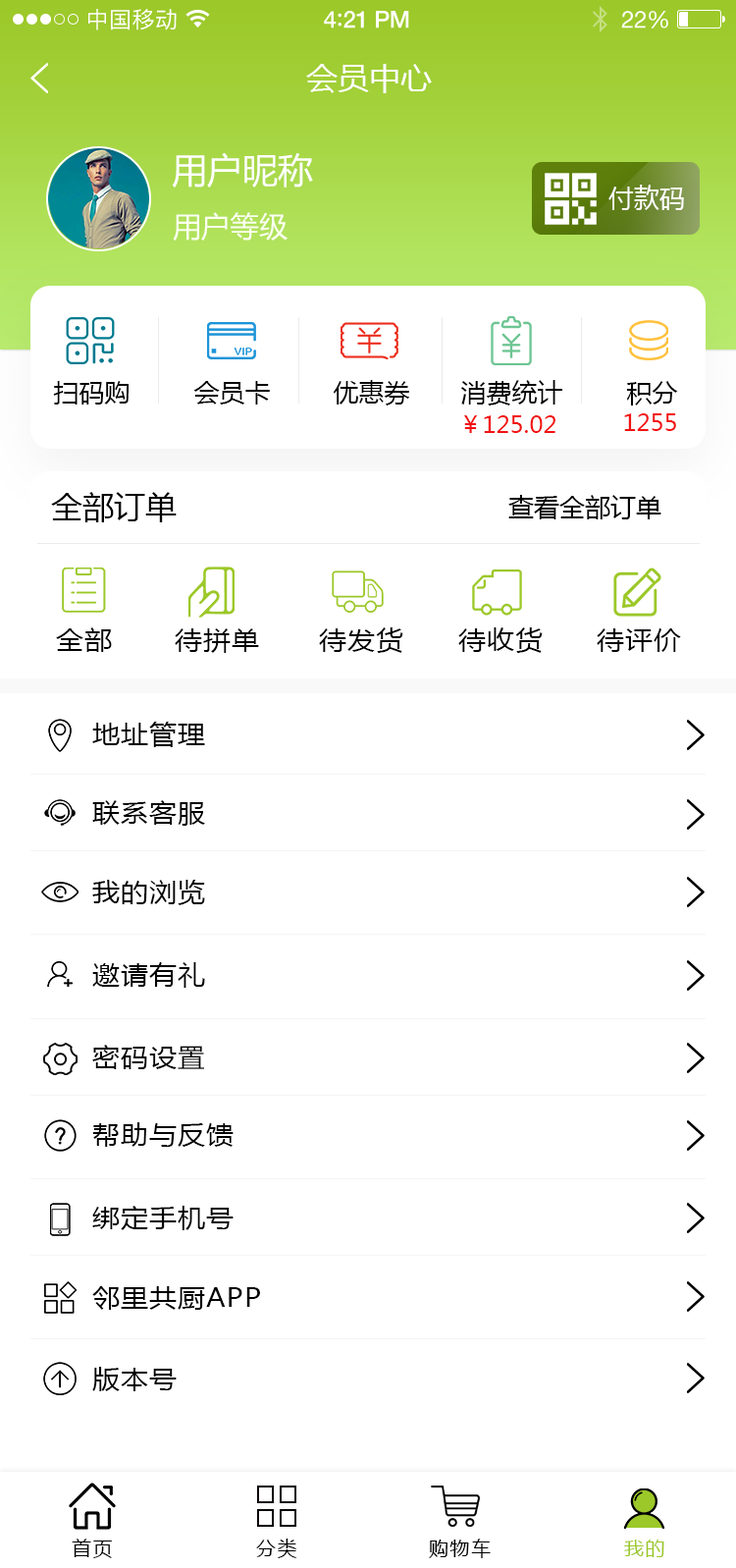
<style>
.page{position:relative;width:736px;height:1568px;background:#ffffff}
.page>*{position:absolute;margin:0}
.t1{font:22.6px "PingFangSC-Regular";letter-spacing:0.02em;color:#ffffff}
.t2{font:23.6px "HelveticaNeue-Medium";letter-spacing:-0.02em;color:#ffffff}
.t3{font:25.5px "Avenir-Medium";letter-spacing:-0.02em;color:#ffffff}
.t4{font:23.6px "HelveticaNeue";letter-spacing:-0.02em;color:#ffffff}
.t5{font:31.4px "MicrosoftYaHei";color:#ffffff;text-transform:uppercase}
.t6{font:35.4px "MicrosoftYaHei";color:#ffffff;text-transform:uppercase}
.t7{font:25.5px "MicrosoftYaHei";color:#ffffff;text-transform:uppercase}
.t8{font:28.8px "MicrosoftYaHei";color:#fbffef;text-transform:uppercase}
.t9{font:25.5px "MicrosoftYaHei";color:#000000;text-transform:uppercase}
.t10{font:23.6px "MicrosoftYaHei";color:#f21212;text-transform:uppercase}
.t11{font:31.4px "MicrosoftYaHei";color:#000000;text-transform:uppercase}
.t12{font:25.5px "MicrosoftYaHei";letter-spacing:0.05em;color:#000000;scale:1.06 1}
.t13{font:19.6px "MicrosoftYaHei";letter-spacing:0.08em;color:#000000;text-transform:uppercase}
.t14{font:19.6px "MicrosoftYaHei";letter-spacing:0.08em;color:#9cc829;text-transform:uppercase}
</style>
<div class="page">
<p class="t1" style="left:88px;top:9px;width:89px;height:21px">中国移动</p>
<p class="t2" style="left:324px;top:11px;width:85px;height:17px">4<span class="t3">:</span>21 PM</p>
<p class="t4" style="left:622px;top:11px;width:47px;height:17px">22%</p>
<p class="t5" style="left:306px;top:64px;width:126px;height:29px">会员中心</p>
<p class="t6" style="left:172px;top:152px;width:141px;height:36px">用户昵称</p>
<p class="t7" style="left:609px;top:185px;width:75px;height:25px">付款码</p>
<p class="t8" style="left:173px;top:212px;width:115px;height:29px">用户等级</p>
<p class="t9" style="left:53px;top:381px;width:76px;height:24px">扫码购</p>
<p class="t9" style="left:193px;top:381px;width:77px;height:24px">会员卡</p>
<p class="t9" style="left:334px;top:380px;width:76px;height:26px">优惠券</p>
<p class="t9" style="left:461px;top:380px;width:102px;height:26px">消费统计</p>
<p class="t9" style="left:627px;top:381px;width:51px;height:25px">积分</p>
<p class="t10" style="left:624px;top:413px;width:52px;height:18px">1255</p>
<p class="t10" style="left:464px;top:415px;width:92px;height:18px">￥125.02</p>
<p class="t11" style="left:51px;top:492px;width:126px;height:30px">全部订单</p>
<p class="t9" style="left:509px;top:495px;width:153px;height:24px">查看全部订单</p>
<p class="t12" style="left:56px;top:627px;width:56px;height:25px">全部</p>
<p class="t12" style="left:175px;top:628px;width:84px;height:25px">待拼单</p>
<p class="t12" style="left:319px;top:627px;width:85px;height:26px">待发货</p>
<p class="t12" style="left:459px;top:627px;width:84px;height:26px">待收货</p>
<p class="t12" style="left:597px;top:628px;width:84px;height:24px">待评价</p>
<p class="t12" style="left:92px;top:722px;width:113px;height:25px">地址管理</p>
<p class="t12" style="left:92px;top:800px;width:113px;height:26px">联系客服</p>
<p class="t12" style="left:92px;top:880px;width:113px;height:25px">我的浏览</p>
<p class="t12" style="left:92px;top:962px;width:113px;height:26px">邀请有礼</p>
<p class="t12" style="left:92px;top:1045px;width:112px;height:24px">密码设置</p>
<p class="t12" style="left:92px;top:1122px;width:142px;height:25px">帮助与反馈</p>
<p class="t12" style="left:92px;top:1206px;width:142px;height:24px">绑定手机号</p>
<p class="t12" style="left:92px;top:1286px;width:168px;height:24px">邻里共厨APP</p>
<p class="t12" style="left:92px;top:1367px;width:85px;height:24px">版本号</p>
<p class="t13" style="left:72px;top:1539px;width:40px;height:19px">首页</p>
<p class="t13" style="left:256px;top:1539px;width:41px;height:19px">分类</p>
<p class="t13" style="left:429px;top:1539px;width:62px;height:19px">购物车</p>
<p class="t14" style="left:624px;top:1540px;width:41px;height:17px">我的</p>
</div>
